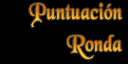
<style>
.page{position:relative;width:128px;height:64px;background:#000000}
.page>*{position:absolute;margin:0}
.t1{font:24px "BlackChancery";font-weight:bold;scale:0.8 1}
</style>
<div class="page">
<p class="t1" style="left:29px;top:3px;width:93px;height:24px">Puntuación</p>
<p class="t1" style="left:67px;top:35px;width:55px;height:24px">Ronda</p>
</div>
